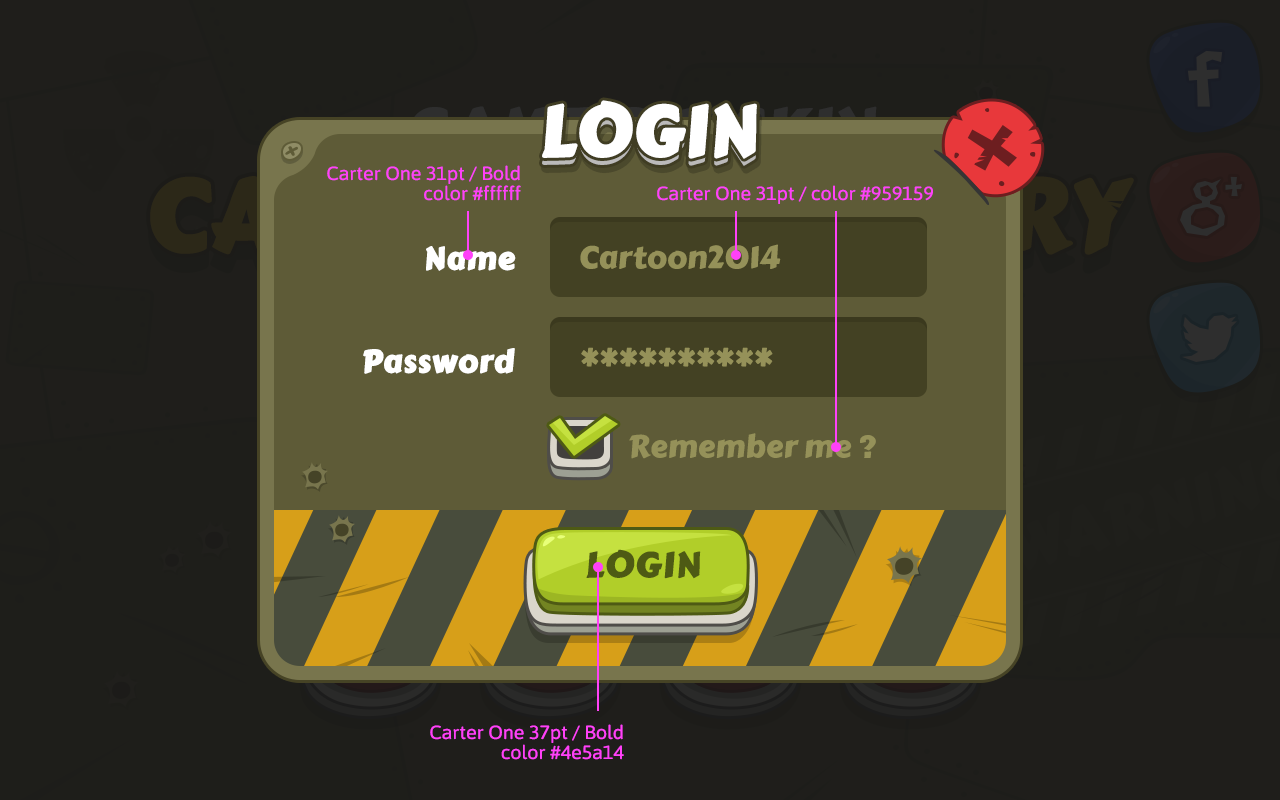
<style>
.page{position:relative;width:1280px;height:800px;background:#1f1e1b}
.page>*{position:absolute;margin:0}
.t1{font:70px "CarterOne";color:#ffffff;text-transform:uppercase;font-weight:bold}
.t2{font:19px/20px "Asap-Regular";letter-spacing:-0.01em;color:#ff41f8;scale:1.05 1}
.t3{font:19px "Asap-Regular";letter-spacing:-0.01em;color:#ff41f8;scale:1.05 1}
.t4{font:31.1px "CarterOne";color:#ffffff;font-weight:bold}
.t5{font:31.1px "CarterOne";color:#959159}
.t6{font:31.1px "CarterOne";color:#ffffff;text-transform:uppercase;font-weight:bold}
.t7{font:35.2px "CarterOne";letter-spacing:-0.025em;color:#4e5a14;text-transform:uppercase;font-weight:bold;scale:1.05 1}
</style>
<div class="page">
<p class="t1" style="left:542px;top:100px;width:215px;height:59px">LOGIN</p>
<p class="t1" style="left:542px;top:107px;width:215px;height:59px">LOGIN</p>
<p class="t2" style="left:327px;top:165px;width:194px;height:36px;text-align:right">Carter One 31pt / Bold<br>color #ffffff</p>
<p class="t3" style="left:657px;top:185px;width:276px;height:19px">Carter One 31pt / color #959159</p>
<p class="t4" style="left:426px;top:246px;width:90px;height:25px">Name</p>
<p class="t5" style="left:580px;top:244px;width:201px;height:25px">Cartoon2014</p>
<p class="t4" style="left:363px;top:348px;width:152px;height:26px"><span class="t6">P</span>assword</p>
<p class="t5" style="left:581px;top:347px;width:192px;height:20px">**********</p>
<p class="t5" style="left:629px;top:433px;width:247px;height:26px">Remember me ?</p>
<p class="t7" style="left:586px;top:549px;width:115px;height:30px">LOGIN</p>
<p class="t2" style="left:430px;top:724px;width:194px;height:36px;text-align:right">Carter One 37pt / Bold<br>color #4e5a14</p>
</div>
